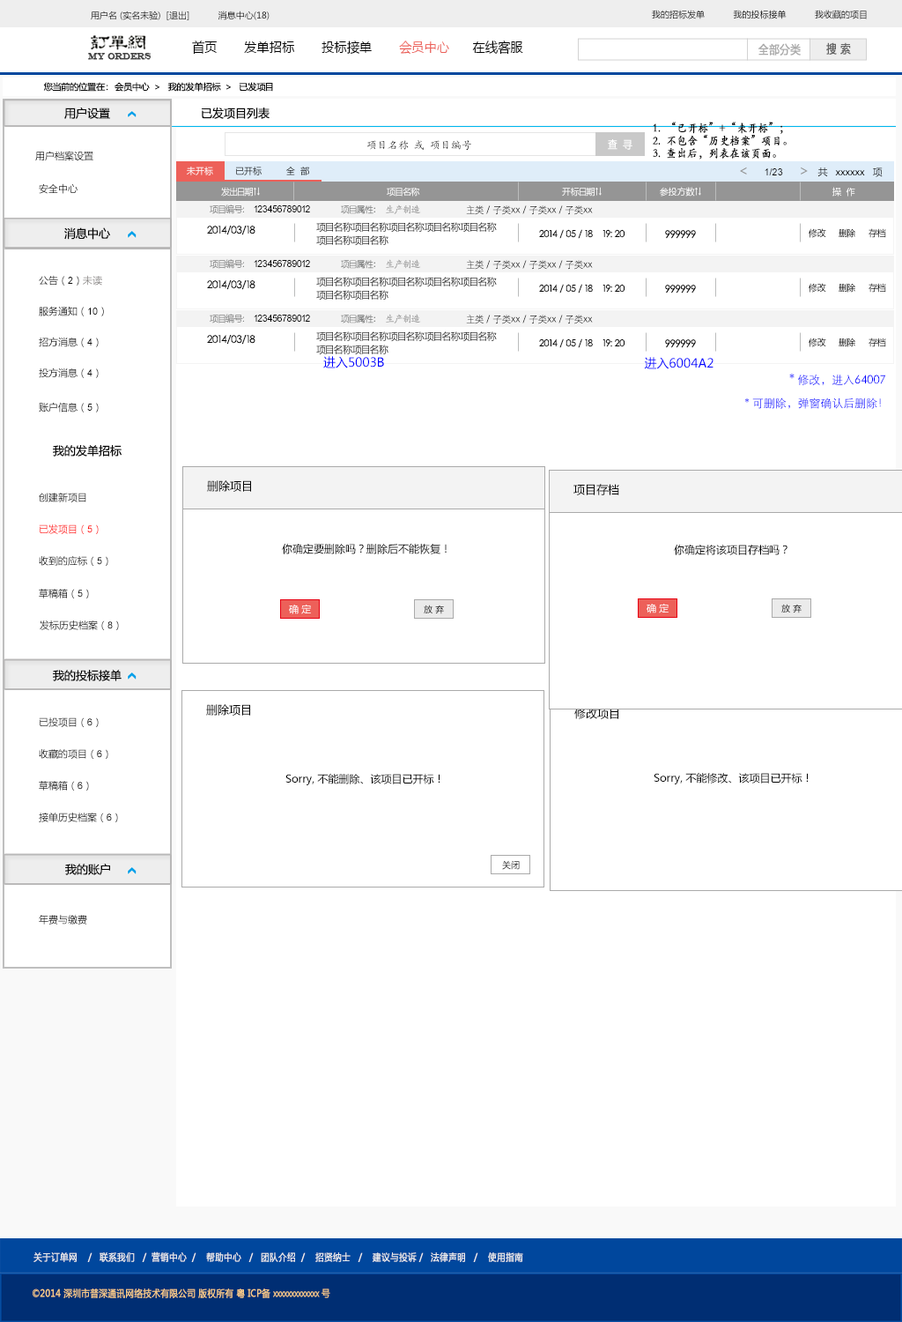
<style>
.page{position:relative;width:902px;height:1322px;background:#ffffff}
.page>*{position:absolute;margin:0}
.t1{font:8.8px "MicrosoftYaHei";color:#000000}
.t2{font:13.6px "MicrosoftYaHei";color:#000000;font-variant:small-caps;scale:0.94 1}
.t3{font:13.6px "MicrosoftYaHei";color:#ed6059;font-variant:small-caps;scale:0.94 1}
.t4{font:8.7px "EngraversMT";color:#434343;font-variant:small-caps;font-weight:bold;scale:0.86 1}
.t5{font:11.6px "MicrosoftYaHei";color:#aaaaaa;font-variant:small-caps;font-weight:bold;scale:0.86 1}
.t6{font:11.6px "MicrosoftYaHei";color:#626262;font-variant:small-caps;font-weight:bold;scale:0.86 1}
.t7{font:8.8px "MicrosoftYaHei";color:#060606}
.t8{font:11.5px "MicrosoftYaHei";color:#060606}
.t9{font:11.6px "STKaiti";color:#000000;font-variant:small-caps;font-weight:bold;scale:0.86 1}
.t10{font:10.6px "KaiTi_GB2312"}
.t11{font:10.7px "MicrosoftYaHei";color:#ffffff;font-variant:small-caps;font-weight:bold;scale:0.86 1}
.t12{font:9.7px "MicrosoftYaHei";color:#060606}
.t13{font:8.8px "MicrosoftYaHei";color:#ffffff}
.t14{font:8.9px "MicrosoftYaHei"}
.t15{font:9.7px "ArialMT";color:#060606}
.t16{font:14.1px "MicrosoftYaHei";color:#959595}
.t17{font:9.7px "MicrosoftYaHei"}
.t18{font:9.7px "ArialMT";color:#000000}
.t19{font:8.8px "MicrosoftYaHei";color:#7a7b7b}
.t20{font:8.8px "YouYuan";color:#7a7b7b}
.t21{font:9.7px "YouYuan";color:#7a7b7b}
.t22{font:9.7px "STKaiti";color:#a0a0a0}
.t23{font:9.7px "STXihei"}
.t24{font:10.6px "STXihei"}
.t25{font:10.6px "STXihei";color:#040404}
.t26{font:14.1px "STXihei";color:#020202}
.t27{font:9.7px/13.2px "MicrosoftYaHei";color:#040404}
.t28{font:9.7px "STXihei";color:#040404}
.t29{font:14.1px "STXihei";color:#040404}
.t30{font:8.8px "MicrosoftYaHei"}
.t31{font:9.7px "MicrosoftYaHei";color:#888584}
.t32{font:12.3px "MicrosoftYaHei";color:#0000ff}
.t33{font:11.5px/12.4px "STXihei";color:#0000ff}
.t34{font:13.3px/12.4px "STXihei";color:#0000ff}
.t35{font:11.5px "MicrosoftYaHei";color:#000000}
.t36{font:9.7px "MicrosoftYaHei";color:#ff0000}
.t37{font:9.7px "ArialMT";color:#ff0000}
.t38{font:10.6px "MicrosoftYaHei";color:#000000}
.t39{font:10.6px "SimSun";color:#000000}
.t40{font:9.7px "MicrosoftYaHei";color:#ffffff}
.t41{font:9.7px "MicrosoftYaHei";color:#eeeeee;font-variant:small-caps;font-weight:bold;scale:0.86 1}
.t42{font:13.6px "STXihei";color:#eeeeee;font-variant:small-caps;font-weight:bold;scale:0.86 1}
.t43{font:9.7px "MicrosoftYaHei";color:#facd89;font-variant:small-caps;font-weight:bold;scale:0.87 1}
.t44{font:9.7px "MicrosoftYaHei";color:#eeeeee;font-variant:small-caps;font-weight:bold;scale:0.87 1}
</style>
<div class="page">
<p class="t1" style="left:91px;top:11px;width:179px;height:9px">用户名 (实名未验)  [退出]           消息中心(18)</p>
<p class="t1" style="left:652px;top:10px;width:215px;height:9px">我的招标发单           我的投标接单           我收藏的项目</p>
<p class="t2" style="left:192px;top:41px;width:331px;height:14px">首页       发单招标       投标接单       <span class="t3">会员中心</span>      在线客服</p>
<p class="t4" style="left:88px;top:53px;width:64px;height:7px">MY ORDERS</p>
<p class="t5" style="left:759px;top:43px;width:42px;height:13px">全部分类</p>
<p class="t6" style="left:826px;top:42px;width:25px;height:13px">搜 索</p>
<p class="t7" style="left:43px;top:82px;width:230px;height:10px">您当前的位置在：  会员中心  &gt;   我的发单招标  &gt;   已发项目</p>
<p class="t8" style="left:64px;top:107px;width:46px;height:12px">用户设置</p>
<p class="t8" style="left:202px;top:107px;width:68px;height:12px">已发项目列表</p>
<p class="t9" style="left:653px;top:122px;width:134px;height:37px">1.  “已开标”+“未开标”；<br>2.  不包含“历史档案”项目。<br>3.  查出后，列表在该页面。</p>
<p class="t10" style="left:367px;top:140px;width:104px;height:11px">项目名称 或 项目编号</p>
<p class="t11" style="left:608px;top:139px;width:25px;height:11px">查  寻</p>
<p class="t12" style="left:35px;top:151px;width:58px;height:10px">用户档案设置</p>
<p class="t13" style="left:187px;top:167px;width:26px;height:8px">未开标</p>
<p class="t14" style="left:236px;top:167px;width:26px;height:8px">已开标</p>
<p class="t14" style="left:286px;top:167px;width:23px;height:8px">全  部</p>
<p class="t15" style="left:740px;top:167px;width:143px;height:10px"><span class="t16">&lt;     </span>1/23     <span class="t16">&gt;  </span><span class="t12">共  </span>xxxxxx  <span class="t12">项</span></p>
<p class="t17" style="left:39px;top:183px;width:39px;height:11px">安全中心</p>
<p class="t13" style="left:221px;top:187px;width:39px;height:9px">发出日期↑↓</p>
<p class="t13" style="left:387px;top:187px;width:33px;height:9px">项目名称</p>
<p class="t13" style="left:562px;top:187px;width:40px;height:9px">开标日期↑↓</p>
<p class="t13" style="left:660px;top:187px;width:41px;height:9px">参投方数↑↓</p>
<p class="t13" style="left:833px;top:187px;width:23px;height:9px">操  作</p>
<p class="t18" style="left:210px;top:204px;width:100px;height:10px"><span class="t19">项目编号:  </span>123456789012</p>
<p class="t20" style="left:341px;top:204px;width:80px;height:10px">项目属性<span class="t21">:  </span><span class="t22">生产制造</span></p>
<p class="t23" style="left:466px;top:205px;width:127px;height:10px"><span class="t24">           </span>主类 / 子类xx / 子类xx / 子类xx</p>
<p class="t8" style="left:64px;top:227px;width:46px;height:13px">消息中心</p>
<p class="t25" style="left:207px;top:226px;width:49px;height:9px"><span class="t26">   </span>2014/03/18</p>
<p class="t27" style="left:316px;top:222px;width:181px;height:24px">项目名称项目名称项目名称项目名称项目名称<br>项目名称项目名称</p>
<p class="t28" style="left:539px;top:229px;width:86px;height:10px"><span class="t29"> </span>2014 / 05 / 18    19: 20</p>
<p class="t25" style="left:665px;top:230px;width:31px;height:9px"><span class="t29"> </span>999999</p>
<p class="t1" style="left:809px;top:228px;width:17px;height:10px">修改</p>
<p class="t30" style="left:839px;top:228px;width:17px;height:10px">删除</p>
<p class="t1" style="left:869px;top:228px;width:17px;height:10px">存档</p>
<p class="t18" style="left:210px;top:259px;width:100px;height:10px"><span class="t19">项目编号:  </span>123456789012</p>
<p class="t20" style="left:341px;top:259px;width:80px;height:10px">项目属性<span class="t21">:  </span><span class="t22">生产制造</span></p>
<p class="t23" style="left:466px;top:260px;width:127px;height:10px"><span class="t24">           </span>主类 / 子类xx / 子类xx / 子类xx</p>
<p class="t12" style="left:39px;top:275px;width:63px;height:10px">公告（<span class="t15">2</span>）<span class="t31">未读</span></p>
<p class="t25" style="left:207px;top:280px;width:49px;height:10px"><span class="t26">   </span>2014/03/18</p>
<p class="t27" style="left:316px;top:277px;width:181px;height:23px">项目名称项目名称项目名称项目名称项目名称<br>项目名称项目名称</p>
<p class="t28" style="left:539px;top:284px;width:86px;height:9px"><span class="t29"> </span>2014 / 05 / 18    19: 20</p>
<p class="t25" style="left:665px;top:285px;width:31px;height:8px"><span class="t29"> </span>999999</p>
<p class="t1" style="left:809px;top:283px;width:17px;height:10px">修改</p>
<p class="t30" style="left:839px;top:283px;width:17px;height:10px">删除</p>
<p class="t1" style="left:869px;top:283px;width:17px;height:10px">存档</p>
<p class="t12" style="left:39px;top:306px;width:65px;height:10px">服务通知（<span class="t15">10</span>）</p>
<p class="t18" style="left:210px;top:314px;width:100px;height:9px"><span class="t19">项目编号:  </span>123456789012</p>
<p class="t20" style="left:341px;top:314px;width:80px;height:9px">项目属性<span class="t21">:  </span><span class="t22">生产制造</span></p>
<p class="t23" style="left:466px;top:315px;width:127px;height:9px"><span class="t24">           </span>主类 / 子类xx / 子类xx / 子类xx</p>
<p class="t12" style="left:39px;top:337px;width:60px;height:10px">招方消息（<span class="t15">4</span>）</p>
<p class="t25" style="left:207px;top:335px;width:49px;height:10px"><span class="t26">   </span>2014/03/18</p>
<p class="t27" style="left:316px;top:331px;width:181px;height:24px">项目名称项目名称项目名称项目名称项目名称<br>项目名称项目名称</p>
<p class="t28" style="left:539px;top:338px;width:86px;height:10px"><span class="t29"> </span>2014 / 05 / 18    19: 20</p>
<p class="t25" style="left:665px;top:339px;width:31px;height:9px"><span class="t29"> </span>999999</p>
<p class="t1" style="left:809px;top:337px;width:17px;height:10px">修改</p>
<p class="t30" style="left:839px;top:337px;width:17px;height:10px">删除</p>
<p class="t1" style="left:869px;top:337px;width:17px;height:10px">存档</p>
<p class="t32" style="left:323px;top:356px;width:61px;height:12px">进入5003B</p>
<p class="t32" style="left:644px;top:357px;width:70px;height:12px">进入6004A2</p>
<p class="t12" style="left:39px;top:367px;width:60px;height:11px">投方消息（<span class="t15">4</span>）</p>
<p class="t33" style="left:745px;top:374px;width:141px;height:35px;text-align:right"><span class="t34">*</span> 修改，进入64007 <br><br>* 可删除，弹窗确认后删除！</p>
<p class="t12" style="left:39px;top:402px;width:60px;height:10px">账户信息（<span class="t15">5</span>）</p>
<p class="t8" style="left:53px;top:445px;width:69px;height:11px">我的发单招标</p>
<p class="t35" style="left:207px;top:480px;width:44px;height:12px">删除项目</p>
<p class="t35" style="left:574px;top:484px;width:45px;height:11px">项目存档</p>
<p class="t17" style="left:39px;top:493px;width:47px;height:9px">创建新项目</p>
<p class="t36" style="left:39px;top:524px;width:60px;height:10px">已发项目（<span class="t37">5</span>）</p>
<p class="t38" style="left:282px;top:543px;width:165px;height:11px">你确定要删除吗？删除后不能恢复！<span class="t39">☒</span></p>
<p class="t38" style="left:674px;top:545px;width:114px;height:10px">你确定将该项目存档吗？<span class="t39">☒</span></p>
<p class="t12" style="left:39px;top:556px;width:69px;height:10px">收到的应标（<span class="t15">5</span>）</p>
<p class="t12" style="left:39px;top:589px;width:50px;height:9px">草稿箱（<span class="t15">5</span>）</p>
<p class="t40" style="left:289px;top:604px;width:22px;height:10px">确 定</p>
<p class="t1" style="left:424px;top:604px;width:20px;height:10px">放 弃</p>
<p class="t40" style="left:647px;top:604px;width:22px;height:9px">确 定</p>
<p class="t1" style="left:782px;top:604px;width:20px;height:9px">放 弃</p>
<p class="t12" style="left:40px;top:620px;width:79px;height:10px">发标历史档案（<span class="t15">8</span>）</p>
<p class="t8" style="left:53px;top:670px;width:69px;height:11px">我的投标接单</p>
<p class="t35" style="left:206px;top:704px;width:44px;height:11px">删除项目</p>
<p class="t35" style="left:574px;top:708px;width:45px;height:11px">修改项目</p>
<p class="t12" style="left:39px;top:717px;width:60px;height:10px">已投项目（<span class="t15">6</span>）</p>
<p class="t12" style="left:39px;top:749px;width:69px;height:10px">收藏的项目（<span class="t15">6</span>）</p>
<p class="t38" style="left:285px;top:773px;width:156px;height:12px">Sorry, 不能删除、该项目已开标！<span class="t39">☒</span></p>
<p class="t38" style="left:654px;top:772px;width:155px;height:12px">Sorry, 不能修改、该项目已开标！<span class="t39">☒</span></p>
<p class="t12" style="left:39px;top:781px;width:50px;height:9px">草稿箱（<span class="t15">6</span>）</p>
<p class="t12" style="left:39px;top:812px;width:79px;height:10px">接单历史档案（<span class="t15">6</span>）</p>
<p class="t8" style="left:65px;top:863px;width:45px;height:12px">我的账户</p>
<p class="t30" style="left:502px;top:860px;width:18px;height:10px">关闭</p>
<p class="t12" style="left:39px;top:915px;width:48px;height:9px">年费与缴费</p>
<p class="t41" style="left:33px;top:1251px;width:490px;height:11px"><span class="t42"><br><br></span>关于订单网    /   联系我们   /  营销中心  /    帮助中心   /   团队介绍  /    招贤纳士   /    建议与投诉 /   法律声明   /    使用指南</p>
<p class="t43" style="left:33px;top:1288px;width:297px;height:10px"><span class="t44"> </span>©2014 深圳市普深通讯网络技术有限公司 版权所有 粤 ICP备 xxxxxxxxxxxxx 号</p>
</div>
